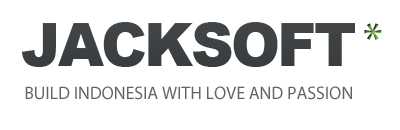
<style>
.page{position:relative;width:400px;height:130px;background:#ffffff}
.page>*{position:absolute;margin:0}
.t1{font:60px "Arial-Black";letter-spacing:-0.05em;color:#3d4143;text-transform:uppercase}
.t2{font:48px "MyriadPro-Regular";letter-spacing:-0.05em}
.t3{font:18px "MyriadPro-Regular";color:#626363;text-transform:uppercase}
</style>
<div class="page">
<p class="t1" style="left:22px;top:22px;width:333px;height:45px">JackSoft</p>
<p class="t2" style="left:364px;top:23px;width:18px;height:17px">*</p>
<p class="t3" style="left:25px;top:86px;width:327px;height:14px">Build Indonesia with love and passion</p>
</div>
